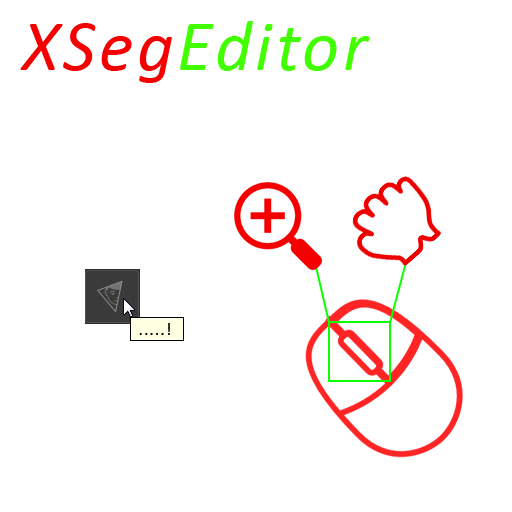
<style>
.page{position:relative;width:512px;height:512px;background:#ffffff}
.page>*{position:absolute;margin:0}
.t1{font:72px "Calibri-Italic";letter-spacing:0.05em;color:#42ff00}
.t2{font:72px "Calibri-Italic";letter-spacing:0.05em;color:#f40000}
</style>
<div class="page">
<p class="t1" style="left:20px;top:21px;width:350px;height:62px"><span class="t2">XSeg</span>Editor</p>
</div>
